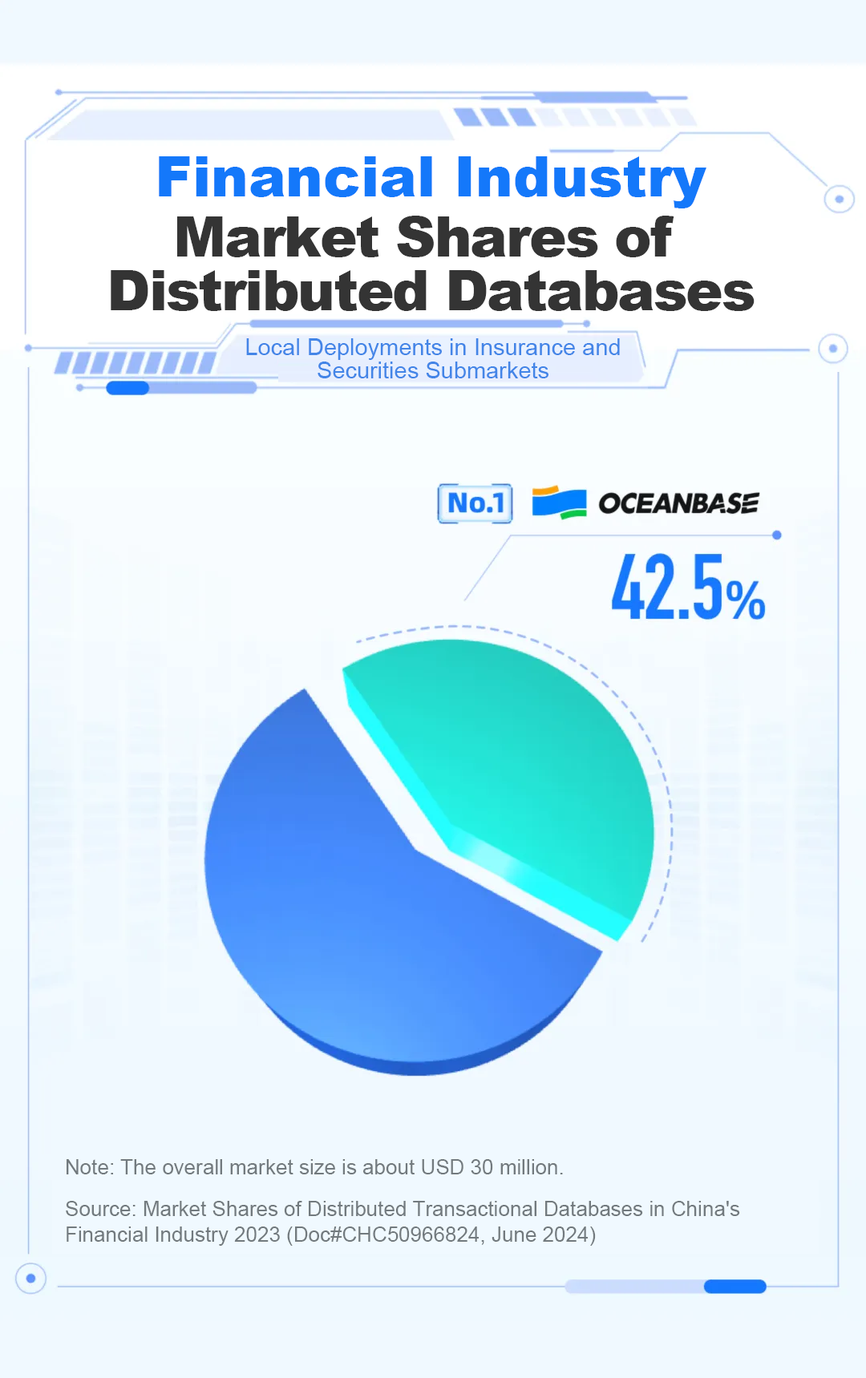
<style>
.page{position:relative;width:866px;height:1378px;background:#f0f9ff}
.page>*{position:absolute;margin:0}
.t1{font:56.1px "Arial-Black";color:#1478fa}
.t2{font:56.1px/53.7px "Arial-Black";letter-spacing:-0.03em;color:#343434}
.t3{font:23.2px/23.2px "ArialMT";color:#4385e7}
.t4{font:20.8px "ArialMT";color:#727a7e}
.t5{font:20.8px/25.6px "ArialMT";color:#727a7e}
</style>
<div class="page">
<p class="t1" style="left:159px;top:156px;width:547px;height:52px">Financial Industry</p>
<p class="t2" style="left:111px;top:216px;width:643px;height:95px;text-align:center">Market Shares of <br>Distributed Databases</p>
<p class="t3" style="left:246px;top:338px;width:374px;height:40px;text-align:center">Local Deployments in Insurance and Securities Submarkets</p>
<p class="t4" style="left:67px;top:1159px;width:496px;height:15px">Note: The overall market size is about USD 30 million.</p>
<p class="t5" style="left:66px;top:1201px;width:674px;height:44px">Source: Market Shares of Distributed Transactional Databases in China's Financial Industry 2023 (Doc#CHC50966824, June 2024)</p>
</div>
